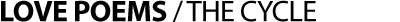
<style>
.page{position:relative;width:400px;height:22px;background:#ffffff}
.page>*{position:absolute;margin:0}
.t1{font:30px "MyriadPro-Regular";letter-spacing:-0.02em;color:#000000}
.t2{font:30px "MyriadPro-Bold";letter-spacing:-0.02em;color:#000000}
</style>
<div class="page">
<p class="t1" style="left:1px;top:0px;width:315px;height:23px"><span class="t2">LOVE POEMS </span>/ THE CYCLE</p>
</div>
